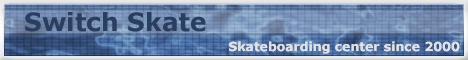
<style>
.page{position:relative;width:468px;height:60px}
.page>*{position:absolute;margin:0}
.t1{font:25px "Verdana-Bold";color:#293e61}
.t2{font:12.5px "Verdana-Bold";color:#e1e1e1}
</style>
<div class="page">
<p class="t1" style="left:25px;top:12px;width:181px;height:20px">Switch Skate</p>
<p class="t2" style="left:229px;top:41px;width:231px;height:13px">Skateboarding center since 2000</p>
</div>
